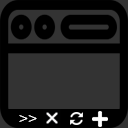
<style>
.page{position:relative;width:128px;height:128px;background:#333333}
.page>*{position:absolute;margin:0}
.t1{font:12px "ArialMT";color:#ffffff}
</style>
<div class="page">
<p class="t1" style="left:19px;top:115px;width:18px;height:7px">&gt;&gt;</p>
</div>
